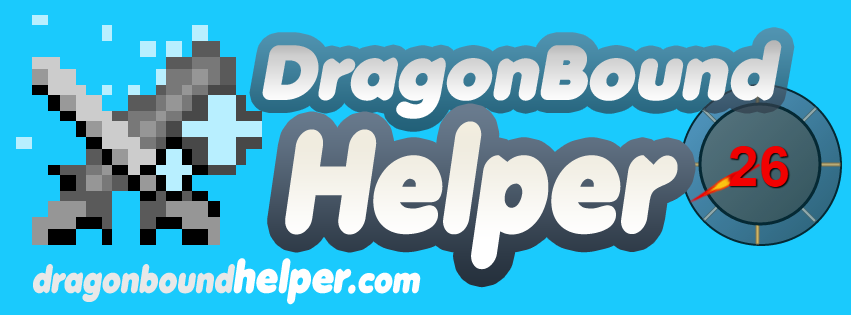
<style>
.page{position:relative;width:851px;height:315px;background:#1acafd}
.page>*{position:absolute;margin:0}
.t1{font:75.4px "Anja-Eliane-Nornal";color:#e6e6e6;font-style:italic}
.t2{font:140.8px "Anja-Eliane-Nornal";color:#f6f4ee;font-style:italic;scale:0.82 1}
.t3{font:36.6px "Anja-Eliane-Nornal";color:#e8e8e8;font-style:italic;scale:0.82 1}
.t4{font:43.9px "Anja-Eliane-Nornal";color:#fefefe;font-style:italic;scale:0.82 1}
.t5{font:36.6px "Anja-Eliane-Nornal";color:#fefefe;font-style:italic;scale:0.82 1}
</style>
<div class="page">
<p class="t1" style="left:262px;top:40px;width:520px;height:79px">DragonBound</p>
<p class="t2" style="left:285px;top:121px;width:393px;height:149px">Helper</p>
<p class="t3" style="left:33px;top:258px;width:388px;height:47px">dragonbound<span class="t4">helper</span><span class="t5">.com</span></p>
</div>
